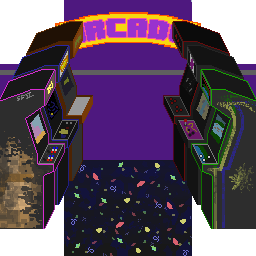
<style>
.page{position:relative;width:256px;height:256px}
.page>*{position:absolute;margin:0}
.t1{font:20px "8BITWONDERNominal";color:#9932ce}
</style>
<div class="page">
<p class="t1" style="left:64px;top:19px;width:127px;height:27px">Arcade</p>
</div>
